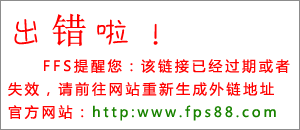
<style>
.page{position:relative;width:300px;height:130px;background:#ffffff}
.page>*{position:absolute;margin:0}
.t1{font:36px "DFTsai-W3-WIN-BF";letter-spacing:0.2em;color:#ff0000}
.t2{font:36px "SimSun";letter-spacing:0.2em;color:#ff0000}
.t3{font:14px/23px "MicrosoftYaHei";letter-spacing:0.2em;color:#ff0000}
.t4{font:14px/23px "MicrosoftYaHei";letter-spacing:0.2em;color:#198300}
</style>
<div class="page">
<p class="t1" style="left:14px;top:13px;width:144px;height:34px">出<span class="t2">错</span>啦！</p>
<p class="t3" style="left:8px;top:59px;width:282px;height:62px">FFS提醒您：该链接已经过期或者<br>失效，请前往网站重新生成外链地址<br>官方网站：<span class="t4">http:www.fps88.com</span></p>
</div>
